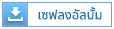
<style>
.page{position:relative;width:114px;height:29px;background:#ffffff}
.page>*{position:absolute;margin:0}
.t1{font:13px "NotoSansThai-Regular";color:#2471a8}
</style>
<div class="page">
<p class="t1" style="left:38px;top:6px;width:64px;height:14px">เซฟลงอัลบั้ม</p>
</div>
